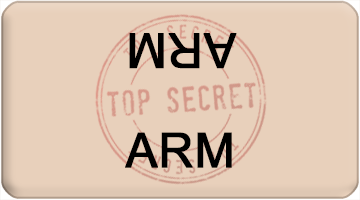
<style>
.page{position:relative;width:360px;height:200px;background:#e8d0bb}
.page>*{position:absolute;margin:0}
.t1{font:48px "ArialMT";color:#000000;font-weight:bold}
</style>
<div class="page">
<p class="t1" style="left:129px;top:33px;width:108px;height:36px;rotate:180deg">ARM</p>
<p class="t1" style="left:125px;top:132px;width:107px;height:36px">ARM</p>
</div>
